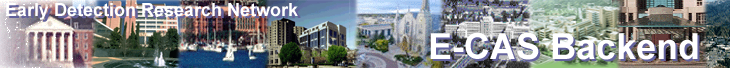
<style>
.page{position:relative;width:730px;height:68px}
.page>*{position:absolute;margin:0}
.t1{font:18px "Arial-BoldMT";color:#ffffff}
.t2{font:36px "Arial-BoldMT";color:#ffffff}
.t3{font:36px "Arial-BoldMT"}
</style>
<div class="page">
<p class="t1" style="left:6px;top:3px;width:292px;height:17px">Early Detection Research Network</p>
<p class="t2" style="left:430px;top:32px;width:268px;height:28px">E-CAS Backend</p>
<p class="t3" style="left:432px;top:34px;width:268px;height:28px">E-CAS Backend</p>
</div>
